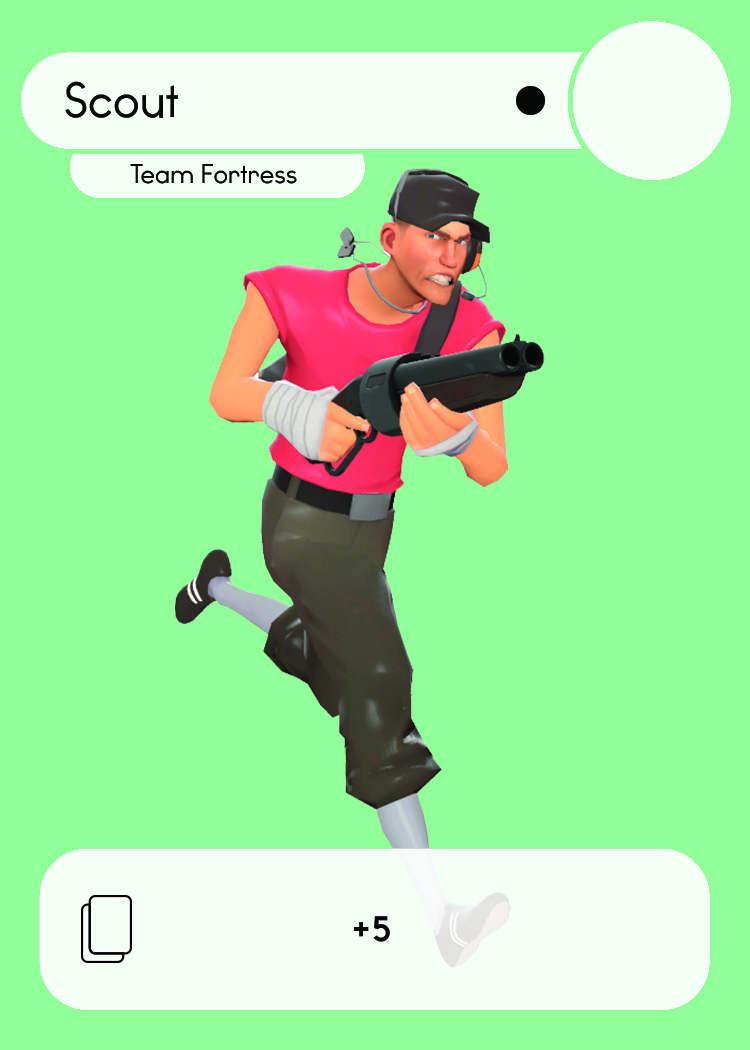
<style>
.page{position:relative;width:750px;height:1050px;background:#91ff97}
.page>*{position:absolute;margin:0}
.t1{font:46.7px "WatchwordRegularDemo";color:#060808}
.t2{font:25.5px "WatchwordRegularDemo";color:#060808}
.t3{font:33.3px "WatchwordBoldDemo";color:#060808}
</style>
<div class="page">
<p class="t1" style="left:65px;top:81px;width:113px;height:37px">Scout</p>
<p class="t2" style="left:130px;top:164px;width:167px;height:20px">Team Fortress</p>
<p class="t3" style="left:354px;top:916px;width:36px;height:26px">+5</p>
</div>
